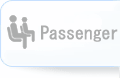
<style>
.page{position:relative;width:120px;height:78px;background:#fefeff}
.page>*{position:absolute;margin:0}
.t1{font:17.7px "MS-Gothic";color:#acadad;font-weight:bold}
</style>
<div class="page">
<p class="t1" style="left:41px;top:25px;width:77px;height:17px">Passenger</p>
</div>
